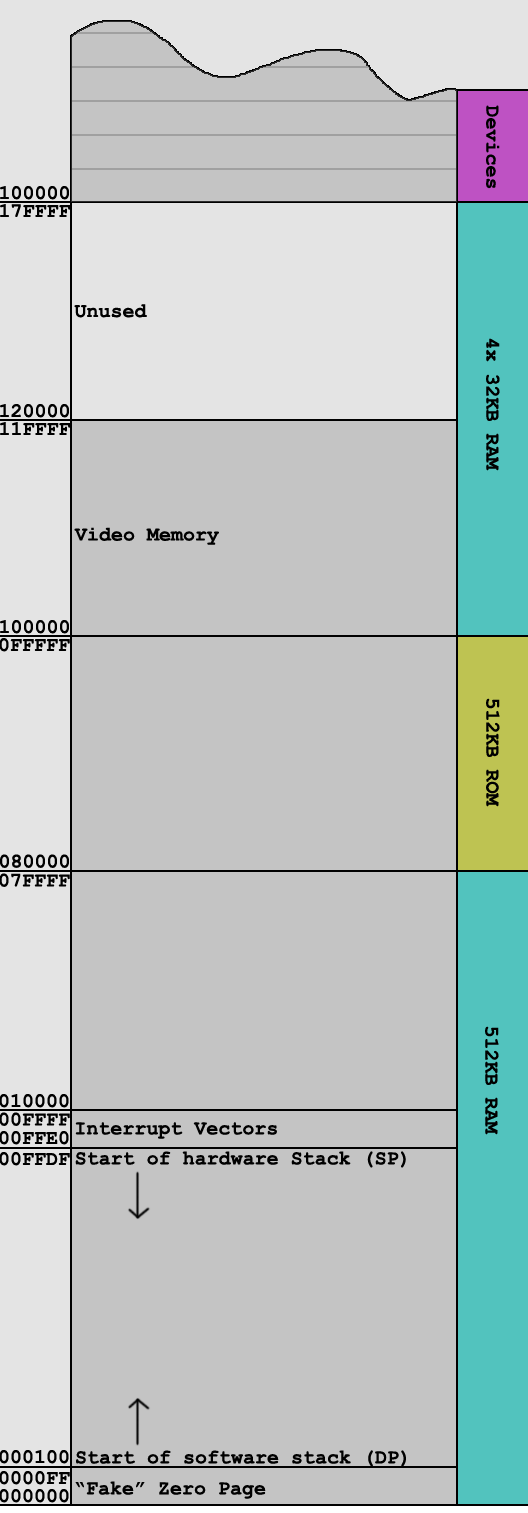
<style>
.page{position:relative;width:528px;height:1513px;background:#c4c4c4}
.page>*{position:absolute;margin:0}
.t1{font:20px "CourierNewPS-BoldMT";color:#000000}
</style>
<div class="page">
<p class="t1" style="left:486px;top:105px;width:14px;height:84px;rotate:90deg">Devices</p>
<p class="t1" style="left:0px;top:204px;width:71px;height:13px">17FFFF</p>
<p class="t1" style="left:74px;top:304px;width:73px;height:14px">Unused</p>
<p class="t1" style="left:486px;top:338px;width:14px;height:133px;rotate:90deg">4x 32KB RAM</p>
<p class="t1" style="left:0px;top:404px;width:69px;height:14px">120000</p>
<p class="t1" style="left:0px;top:422px;width:71px;height:13px">11FFFF</p>
<p class="t1" style="left:74px;top:527px;width:145px;height:18px">Video Memory</p>
<p class="t1" style="left:0px;top:620px;width:69px;height:14px">100000</p>
<p class="t1" style="left:0px;top:638px;width:70px;height:14px">0FFFFF</p>
<p class="t1" style="left:486px;top:698px;width:14px;height:109px;rotate:90deg">512KB ROM</p>
<p class="t1" style="left:0px;top:854px;width:69px;height:14px">080000</p>
<p class="t1" style="left:0px;top:873px;width:70px;height:14px">07FFFF</p>
<p class="t1" style="left:485px;top:1026px;width:14px;height:109px;rotate:90deg">512KB RAM</p>
<p class="t1" style="left:0px;top:1094px;width:69px;height:14px">010000</p>
<p class="t1" style="left:0px;top:1112px;width:70px;height:14px">00FFFF</p>
<p class="t1" style="left:0px;top:1131px;width:69px;height:14px">00FFE0</p>
<p class="t1" style="left:75px;top:1122px;width:202px;height:17px">Interrupt Vectors</p>
<p class="t1" style="left:0px;top:1152px;width:70px;height:14px">00FFDF</p>
<p class="t1" style="left:75px;top:1151px;width:331px;height:17px">Start of hardware Stack (SP)</p>
<p class="t1" style="left:0px;top:1450px;width:69px;height:14px">000100</p>
<p class="t1" style="left:76px;top:1450px;width:330px;height:17px">Start of software stack (DP)</p>
<p class="t1" style="left:0px;top:1471px;width:70px;height:14px">0000FF</p>
<p class="t1" style="left:75px;top:1481px;width:191px;height:18px">“Fake” Zero Page</p>
<p class="t1" style="left:0px;top:1489px;width:69px;height:14px">000000</p>
</div>
